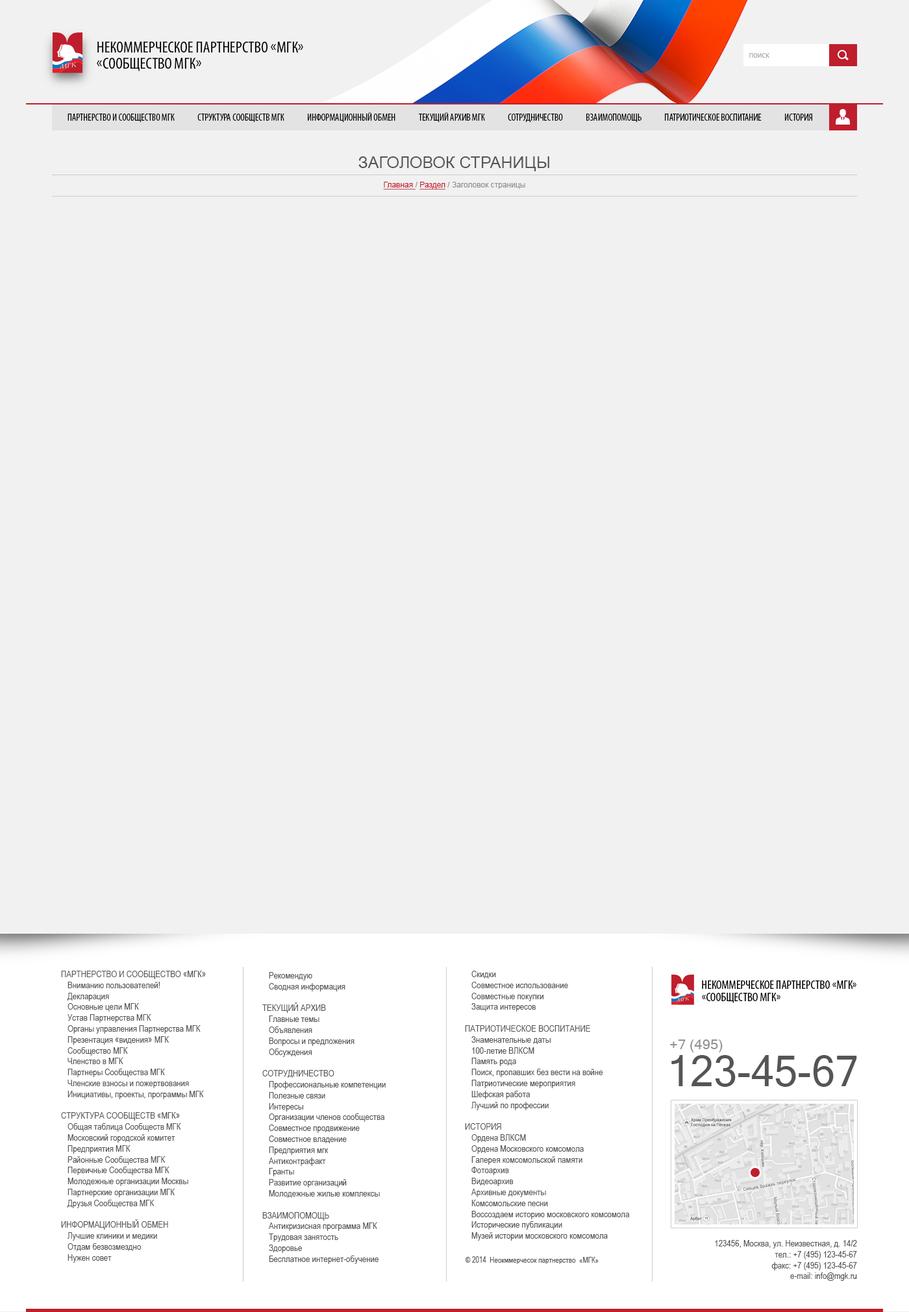
<style>
.page{position:relative;width:909px;height:1312px;background:#f1f1f1}
.page>*{position:absolute;margin:0}
.t1{font:16.2px/16.2px "MyriadPro-Cond";color:#000000;text-transform:uppercase}
.t2{font:7.8px "Tahoma";color:#ababab}
.t3{font:9.7px "MyriadPro-Cond";color:#000000;text-transform:uppercase}
.t4{font:16.2px "ArialMT";color:#555555;text-transform:uppercase}
.t5{font:7.8px "ArialMT";color:#919191}
.t6{font:7.8px "ArialMT";color:#bf1e2d;text-decoration:underline}
.t7{font:9.1px "ArialNarrow";color:#555555}
.t8{font:9.1px "ArialNarrow";color:#555555;text-transform:uppercase}
.t9{font:12.1px/12.1px "MyriadPro-Cond";color:#000000;text-transform:uppercase}
.t10{font:13.9px "MicrosoftSansSerif";color:#919191;scale:1.03 1}
.t11{font:42.9px "MicrosoftSansSerif";color:#555555}
.t12{font:7.8px "ArialNarrow";color:#555555}
</style>
<div class="page">
<p class="t1" style="left:97px;top:42px;width:206px;height:29px">Некоммерческое партнерство «МГК» <br>«Сообщество МГК»</p>
<p class="t2" style="left:749px;top:53px;width:20px;height:5px">поиск</p>
<p class="t3" style="left:67px;top:112px;width:745px;height:11px">Партнерство и Сообщество МГК               Структура Сообществ МГК               Информационный обмен               Текущий архив МГК               Сотрудничество               Взаимопомощь               Патриотическое воспитание               История</p>
<p class="t4" style="left:358px;top:156px;width:191px;height:15px">ЗАГОЛОВОК СТРАНИЦЫ</p>
<p class="t5" style="left:383px;top:182px;width:142px;height:8px"><span class="t6">Главная </span>/ <span class="t6">Раздел </span>/ Заголовок страницы</p>
<p class="t7" style="left:61px;top:971px;width:145px;height:292px"><span class="t8">Партнерство и Сообщество «МГК</span>»<br>Вниманию пользователей!<br>Декларация<br>Основные цели МГК<br>Устав Партнерства МГК<br>Органы управления Партнерства МГК<br>Презентация «видения» МГК<br>Сообщество МГК<br>Членство в МГК<br>Партнеры Сообщества МГК<br>Членские взносы и пожертвования<br>Инициативы, проекты, программы МГК<br><br><span class="t8">Структура Сообществ «МГК»<br></span>Общая таблица Сообществ МГК<br>Московский городской комитет<br>Предприятия МГК<br>Районные Сообщества МГК<br>Первичные Сообщества МГК<br>Молодежные организации Москвы<br>Партнерские организации МГК<br>Друзья Сообщества МГК<br><br><span class="t8">Информационный обмен<br></span>Лучшие клиники и медики<br>Отдам безвозмездно<br>Нужен совет</p>
<p class="t7" style="left:262px;top:972px;width:124px;height:292px">Рекомендую<br>Сводная информация<br><br><span class="t8">Текущий архив<br></span>Главные темы<br>Объявления<br>Вопросы и предложения<br>Обсуждения<br><br><span class="t8">Сотрудничество<br></span>Профессиональные компетенции<br>Полезные связи<br>Интересы<br>Организации членов сообщества<br>Совместное продвижение<br>Совместное владение<br>Предприятия мгк<br>Антиконтрафакт<br>Гранты<br>Развитие организаций<br>Молодежные жилые комплексы<br><br><span class="t8">Взаимопомощь<br></span>Антикризисная программа МГК<br>Трудовая занятость<br>Здоровье<br>Бесплатное интернет-обучение</p>
<p class="t7" style="left:465px;top:971px;width:164px;height:270px">Скидки<br>Совместное использование <br>Совместные покупки<br>Защита интересов<br><br><span class="t8">Патриотическое воспитание<br></span>Знаменательные даты<br>100-летие <span class="t8">влксм<br></span>Память рода<br>Поиск, пропавших без вести на войне<br>Патриотические мероприятия<br>Шефская работа<br>Лучший по профессии<br><br><span class="t8">История<br></span>Ордена ВЛКСМ<br>Ордена Московского комсомола<br>Галерея комсомольской памяти<br>Фотоархив<br>Видеоархив<br>Архивные документы<br>Комсомольские песни<br>Воссоздаем историю московского комсомола<br>Исторические публикации<br>Музей истории московского комсомола</p>
<p class="t9" style="left:702px;top:981px;width:154px;height:22px">Некоммерческое партнерство «МГК» <br>«Сообщество МГК»</p>
<p class="t10" style="left:670px;top:1040px;width:52px;height:13px">+7 (495)</p>
<p class="t11" style="left:671px;top:1055px;width:186px;height:32px">123-45-67</p>
<p class="t7" style="left:715px;top:1240px;width:142px;height:41px;text-align:right">123456, Москва, ул. Неизвестная, д. 14/2<br>тел.: +7 (495) 123-45-67<br>факс: +7 (495) 123-45-67<br>e-mail: info@mgk.ru</p>
<p class="t12" style="left:465px;top:1257px;width:133px;height:7px">© 2014  Неокммерчесок партнерство  «МГК»</p>
</div>
